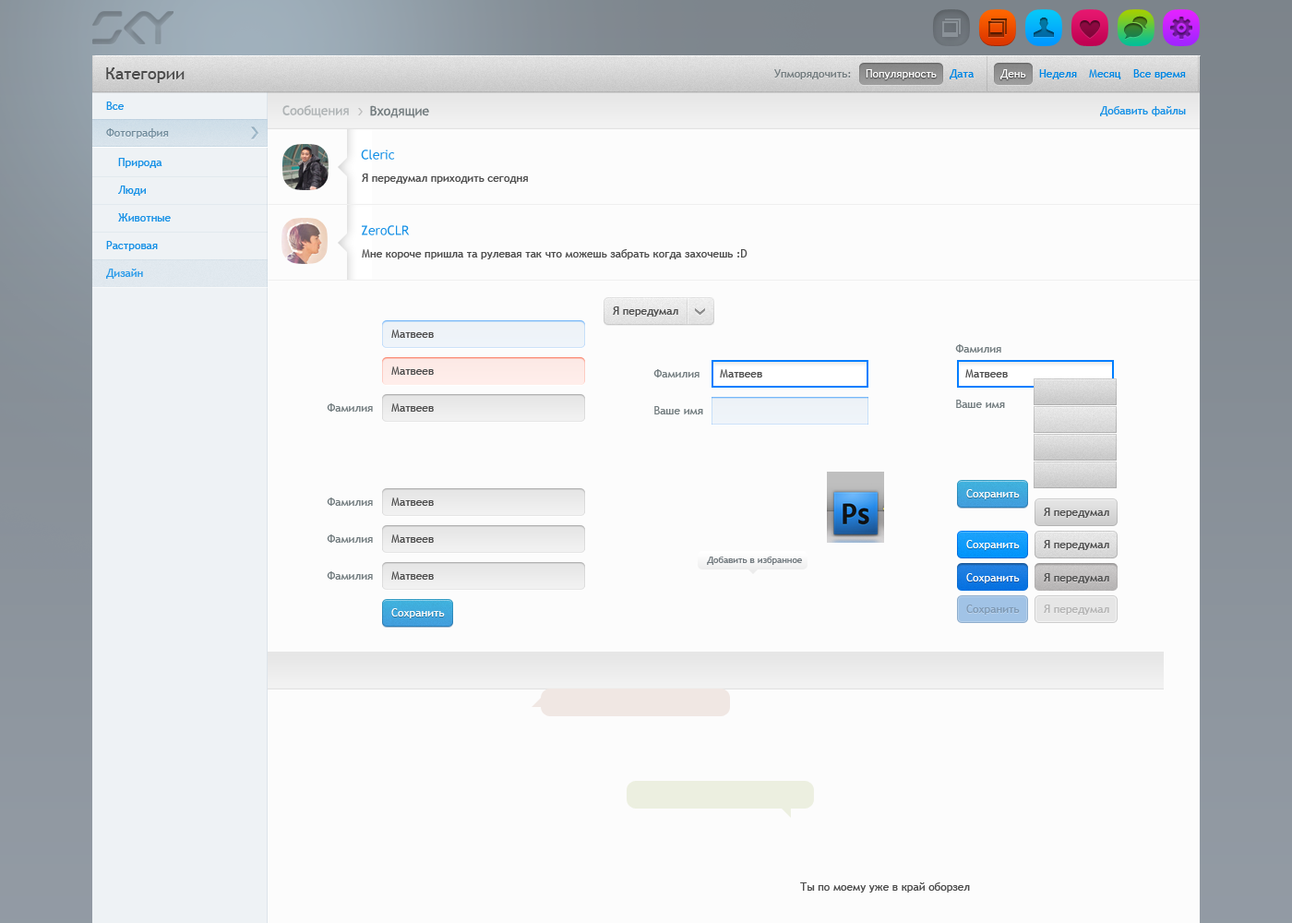
<style>
.page{position:relative;width:1292px;height:923px;background:#fcfcfc}
.page>*{position:absolute;margin:0}
.t1{font:16.6px "TrebuchetMS";color:#4c4c4c}
.t2{font:11.1px "TrebuchetMS";color:#737c7f}
.t3{font:11.1px "TrebuchetMS";color:#ffffff}
.t4{font:11.1px "TrebuchetMS";color:#0086e3}
.t5{font:11.1px "TrebuchetMS";color:#1791e6}
.t6{font:12.9px "TrebuchetMS";color:#afb4b5}
.t7{font:12.9px "TrebuchetMS";color:#737c7f}
.t8{font:11.1px "TrebuchetMS";color:#728c9c}
.t9{font:12.9px "TrebuchetMS";color:#1791e6}
.t10{font:11.1px "TrebuchetMS";color:#4d4d4d}
.t11{font:11.1px "TrebuchetMS";color:#2b9be9}
.t12{font:11.1px "TrebuchetMS";color:#727c7f}
.t13{font:9.2px "TrebuchetMS";color:#737b80}
.t14{font:11.1px "TrebuchetMS";color:#7d98b3}
.t15{font:11.1px "TrebuchetMS";color:#b3b3b3}
</style>
<div class="page">
<p class="t1" style="left:106px;top:67px;width:79px;height:16px">Категории</p>
<p class="t2" style="left:774px;top:69px;width:77px;height:10px">Упморядочить:</p>
<p class="t3" style="left:866px;top:69px;width:71px;height:10px">Популярность</p>
<p class="t4" style="left:950px;top:69px;width:24px;height:10px">Дата</p>
<p class="t3" style="left:1000px;top:69px;width:26px;height:10px">День</p>
<p class="t4" style="left:1039px;top:69px;width:38px;height:10px">Неделя</p>
<p class="t4" style="left:1089px;top:69px;width:32px;height:10px">Месяц</p>
<p class="t4" style="left:1133px;top:69px;width:53px;height:10px">Все время</p>
<p class="t5" style="left:106px;top:102px;width:18px;height:8px">Все</p>
<p class="t6" style="left:282px;top:105px;width:67px;height:13px">Сообщения</p>
<p class="t7" style="left:370px;top:105px;width:59px;height:13px">Входящие</p>
<p class="t5" style="left:1100px;top:106px;width:86px;height:10px">Добавить файлы</p>
<p class="t8" style="left:106px;top:128px;width:63px;height:10px">Фотография</p>
<p class="t9" style="left:361px;top:150px;width:34px;height:10px">Cleric</p>
<p class="t5" style="left:118px;top:158px;width:44px;height:10px">Природа</p>
<p class="t10" style="left:362px;top:174px;width:166px;height:10px">Я передумал приходить сегодня</p>
<p class="t5" style="left:118px;top:186px;width:28px;height:10px">Люди</p>
<p class="t5" style="left:118px;top:213px;width:53px;height:8px">Животные</p>
<p class="t9" style="left:362px;top:225px;width:48px;height:10px">ZeroCLR</p>
<p class="t5" style="left:106px;top:241px;width:52px;height:10px">Растровая</p>
<p class="t10" style="left:362px;top:249px;width:386px;height:10px">Мне короче пришла та рулевая так что можешь забрать когда захочешь :D</p>
<p class="t11" style="left:106px;top:269px;width:37px;height:10px">Дизайн</p>
<p class="t10" style="left:613px;top:306px;width:65px;height:11px">Я передумал</p>
<p class="t10" style="left:391px;top:329px;width:43px;height:9px">Матвеев</p>
<p class="t12" style="left:955px;top:344px;width:46px;height:9px">Фамилия</p>
<p class="t10" style="left:391px;top:366px;width:43px;height:9px">Матвеев</p>
<p class="t12" style="left:653px;top:369px;width:47px;height:8px">Фамилия</p>
<p class="t10" style="left:720px;top:369px;width:42px;height:8px">Матвеев</p>
<p class="t10" style="left:965px;top:369px;width:43px;height:8px">Матвеев</p>
<p class="t12" style="left:956px;top:400px;width:49px;height:8px">Ваше имя</p>
<p class="t12" style="left:327px;top:403px;width:46px;height:9px">Фамилия</p>
<p class="t10" style="left:391px;top:403px;width:43px;height:9px">Матвеев</p>
<p class="t12" style="left:654px;top:406px;width:49px;height:8px">Ваше имя</p>
<p class="t12" style="left:327px;top:497px;width:46px;height:9px">Фамилия</p>
<p class="t10" style="left:391px;top:497px;width:43px;height:9px">Матвеев</p>
<p class="t3" style="left:966px;top:489px;width:54px;height:10px">Сохранить</p>
<p class="t10" style="left:1044px;top:508px;width:65px;height:10px">Я передумал</p>
<p class="t12" style="left:327px;top:534px;width:46px;height:9px">Фамилия</p>
<p class="t10" style="left:391px;top:534px;width:43px;height:9px">Матвеев</p>
<p class="t3" style="left:966px;top:540px;width:54px;height:10px">Сохранить</p>
<p class="t10" style="left:1044px;top:540px;width:65px;height:10px">Я передумал</p>
<p class="t13" style="left:707px;top:557px;width:95px;height:8px">Добавить в избранное</p>
<p class="t12" style="left:327px;top:571px;width:46px;height:9px">Фамилия</p>
<p class="t10" style="left:391px;top:571px;width:43px;height:9px">Матвеев</p>
<p class="t3" style="left:966px;top:573px;width:54px;height:10px">Сохранить</p>
<p class="t10" style="left:1044px;top:573px;width:65px;height:10px">Я передумал</p>
<p class="t14" style="left:966px;top:604px;width:54px;height:11px">Сохранить</p>
<p class="t15" style="left:1044px;top:604px;width:65px;height:11px">Я передумал</p>
<p class="t3" style="left:391px;top:608px;width:54px;height:10px">Сохранить</p>
<p class="t10" style="left:800px;top:882px;width:170px;height:10px">Ты по моему уже в край оборзел</p>
</div>
